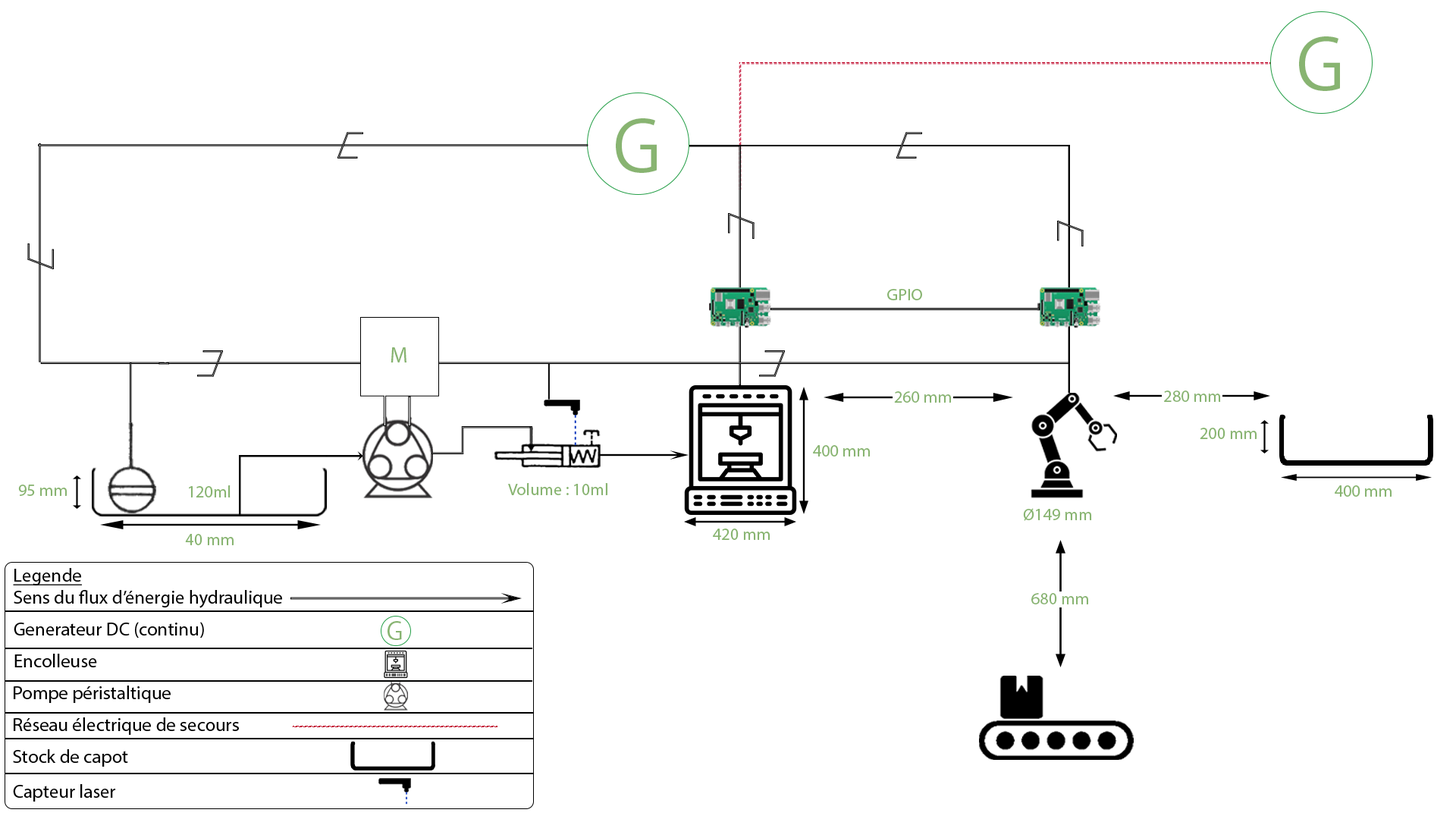
<style>
.page{position:relative;width:1456px;height:819px;background:#ffffff}
.page>*{position:absolute;margin:0}
.t1{font:69.8px "KozGoPr6N-Regular";color:#88b471}
.t2{font:17px "MyriadPro-Regular";color:#88b471}
.t3{font:22.3px "MyriadPro-Regular";color:#88b471}
.t4{font:18.8px "MyriadPro-Regular";color:#000000;text-decoration:underline}
.t5{font:18.8px "MyriadPro-Regular";color:#000000}
.t6{font:24.1px "KozGoPr6N-Regular";color:#88b471}
</style>
<div class="page">
<p class="t1" style="left:1299px;top:36px;width:41px;height:55px">G</p>
<p class="t1" style="left:616px;top:118px;width:41px;height:55px">G</p>
<p class="t2" style="left:887px;top:289px;width:35px;height:11px">GPIO</p>
<p class="t3" style="left:391px;top:347px;width:15px;height:15px">M</p>
<p class="t2" style="left:894px;top:391px;width:57px;height:12px">260 mm</p>
<p class="t2" style="left:1164px;top:391px;width:57px;height:11px">280 mm</p>
<p class="t2" style="left:1200px;top:428px;width:57px;height:11px">200 mm</p>
<p class="t2" style="left:813px;top:445px;width:57px;height:12px">400 mm</p>
<p class="t2" style="left:18px;top:485px;width:49px;height:11px">95 mm</p>
<p class="t2" style="left:189px;top:485px;width:42px;height:12px">120ml</p>
<p class="t2" style="left:508px;top:483px;width:99px;height:12px">Volume : 10ml</p>
<p class="t2" style="left:1335px;top:485px;width:57px;height:12px">400 mm</p>
<p class="t2" style="left:1023px;top:508px;width:69px;height:13px">Ø149 mm</p>
<p class="t2" style="left:185px;top:534px;width:49px;height:11px">40 mm</p>
<p class="t2" style="left:713px;top:529px;width:57px;height:11px">420 mm</p>
<p class="t4" style="left:13px;top:568px;width:69px;height:17px">Legende</p>
<p class="t5" style="left:14px;top:590px;width:268px;height:18px">Sens du flux d’énergie hydraulique</p>
<p class="t2" style="left:1031px;top:593px;width:57px;height:11px">680 mm</p>
<p class="t5" style="left:14px;top:622px;width:190px;height:16px">Generateur DC (continu)</p>
<p class="t6" style="left:388px;top:621px;width:14px;height:19px">G</p>
<p class="t5" style="left:14px;top:654px;width:83px;height:13px">Encolleuse</p>
<p class="t5" style="left:14px;top:686px;width:157px;height:17px">Pompe péristaltique</p>
<p class="t5" style="left:14px;top:717px;width:225px;height:18px">Réseau électrique de secours</p>
<p class="t5" style="left:13px;top:749px;width:115px;height:18px">Stock de capot</p>
<p class="t5" style="left:13px;top:784px;width:102px;height:18px">Capteur laser</p>
</div>
